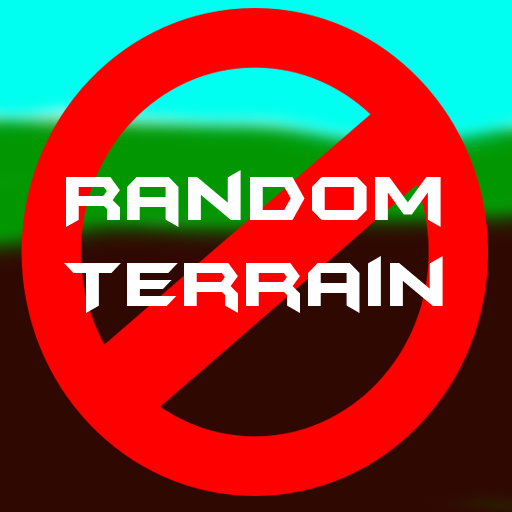
<style>
.page{position:relative;width:512px;height:512px;background:#ff0000}
.page>*{position:absolute;margin:0}
.t1{font:72px "BatmanForeverAlternate";color:#ffffff}
</style>
<div class="page">
<p class="t1" style="left:64px;top:170px;width:379px;height:143px;text-align:center">Random<br>Terrain</p>
</div>
